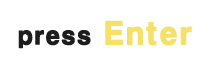
<style>
.page{position:relative;width:220px;height:73px;background:#ffffff}
.page>*{position:absolute;margin:0}
.t1{font:24px "H2gtrE";color:#1d1d1d;font-weight:bold}
.t2{font:30px "H2gtrE";color:#f4e165;font-weight:bold}
</style>
<div class="page">
<p class="t1" style="left:18px;top:20px;width:174px;height:29px">press <span class="t2">Enter</span></p>
</div>
